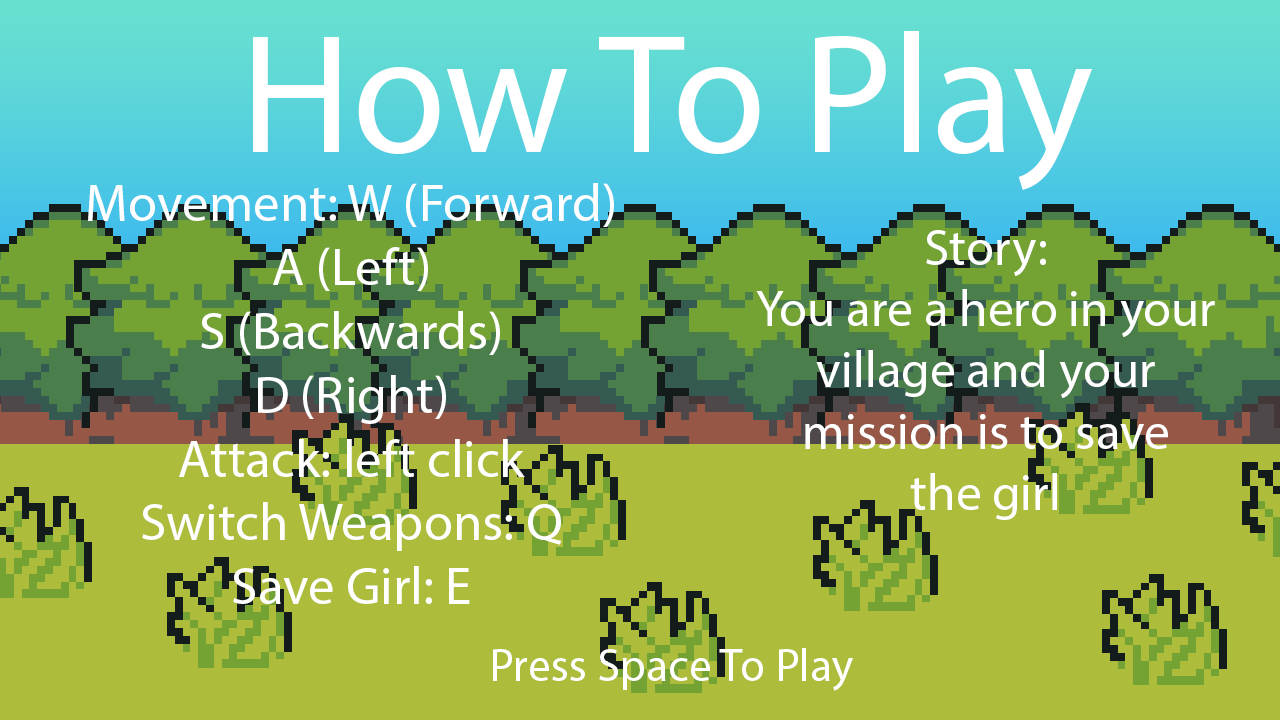
<style>
.page{position:relative;width:1280px;height:720px;background:#adbc3a}
.page>*{position:absolute;margin:0}
.t1{font:171.1px "MyriadPro-Regular";color:#ffffff}
.t2{font:53.2px "MyriadPro-Regular";color:#ffffff}
.t3{font:51.1px "MyriadPro-Regular";color:#ffffff}
.t4{font:46.1px "MyriadPro-Regular";color:#ffffff}
</style>
<div class="page">
<p class="t1" style="left:253px;top:31px;width:839px;height:159px">How To Play</p>
<p class="t2" style="left:88px;top:183px;width:526px;height:421px;text-align:center">Movement: W (Forward)<br>A (Left)<br>S (Backwards)<br>D (Right)<br>Attack: left click<br>Switch Weapons: Q<br>Save Girl: E</p>
<p class="t3" style="left:756px;top:230px;width:459px;height:290px;text-align:center">Story:<br>You are a hero in your<br>village and your<br>mission is to save<br>the girl</p>
<p class="t4" style="left:493px;top:648px;width:360px;height:43px">Press Space To Play</p>
</div>
